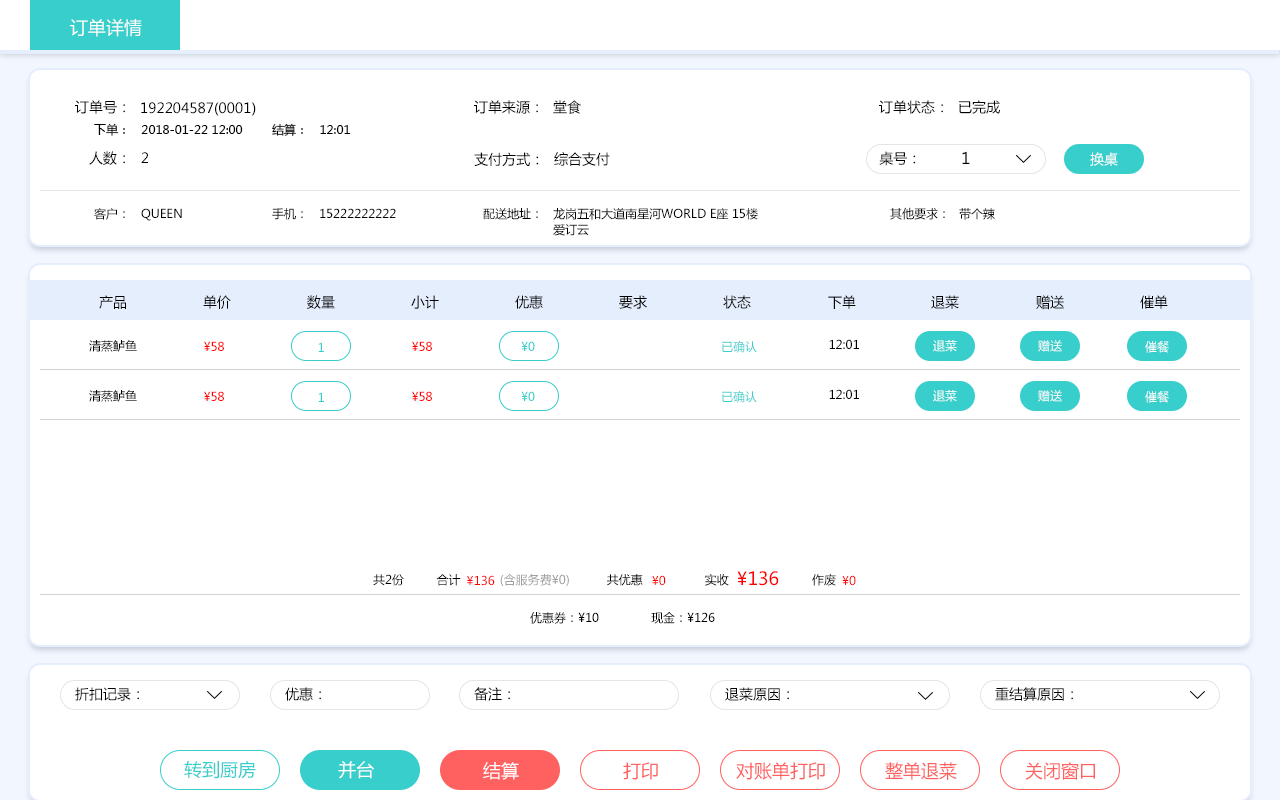
<style>
.page{position:relative;width:1280px;height:800px;background:#ffffff}
.page>*{position:absolute;margin:0}
.t1{font:18px "MicrosoftYaHei";color:#ffffff}
.t2{font:14px "MicrosoftYaHei";color:#000000}
.t3{font:12px "MicrosoftYaHei";color:#000000}
.t4{font:16px "MicrosoftYaHei";color:#000000}
.t5{font:14px "MicrosoftYaHei";color:#ffffff}
.t6{font:12px/16px "MicrosoftYaHei";color:#000000}
.t7{font:12px "MicrosoftYaHei";color:#ff0000}
.t8{font:12px "MicrosoftYaHei";color:#38cecc}
.t9{font:12px "MicrosoftYaHei";color:#ffffff}
.t10{font:12px "MicrosoftYaHei";color:#a0a0a0}
.t11{font:18px "MicrosoftYaHei";color:#ff0000}
.t12{font:18px "MicrosoftYaHei";color:#38cecc}
.t13{font:18px "MicrosoftYaHei";color:#ff6160}
</style>
<div class="page">
<p class="t1" style="left:70px;top:18px;width:72px;height:19px">订单详情</p>
<p class="t2" style="left:75px;top:100px;width:50px;height:14px">订单号：</p>
<p class="t2" style="left:141px;top:102px;width:115px;height:14px">192204587(0001)</p>
<p class="t2" style="left:474px;top:100px;width:64px;height:14px">订单来源：</p>
<p class="t2" style="left:553px;top:100px;width:28px;height:14px">堂食</p>
<p class="t2" style="left:879px;top:100px;width:64px;height:14px">订单状态：</p>
<p class="t2" style="left:959px;top:100px;width:41px;height:14px">已完成</p>
<p class="t3" style="left:94px;top:123px;width:31px;height:13px">下单：</p>
<p class="t3" style="left:141px;top:125px;width:102px;height:9px">2018-01-22 12:00</p>
<p class="t3" style="left:272px;top:123px;width:31px;height:13px">结算：</p>
<p class="t3" style="left:320px;top:125px;width:30px;height:9px">12:01</p>
<p class="t2" style="left:89px;top:151px;width:36px;height:14px">人数：</p>
<p class="t2" style="left:141px;top:152px;width:7px;height:11px">2</p>
<p class="t2" style="left:474px;top:152px;width:65px;height:14px">支付方式：</p>
<p class="t2" style="left:554px;top:152px;width:56px;height:14px">综合支付</p>
<p class="t2" style="left:879px;top:151px;width:37px;height:15px">桌号：</p>
<p class="t4" style="left:962px;top:151px;width:8px;height:13px">1</p>
<p class="t5" style="left:1090px;top:152px;width:28px;height:14px">换桌</p>
<p class="t3" style="left:94px;top:208px;width:31px;height:12px">客户：</p>
<p class="t3" style="left:141px;top:208px;width:41px;height:13px">QUEEN</p>
<p class="t3" style="left:272px;top:208px;width:31px;height:12px">手机：</p>
<p class="t3" style="left:320px;top:208px;width:76px;height:10px">15222222222</p>
<p class="t3" style="left:483px;top:208px;width:55px;height:12px">配送地址：</p>
<p class="t6" style="left:553px;top:208px;width:205px;height:28px">龙岗五和大道南星河WORLD E座 15楼<br>爱订云</p>
<p class="t3" style="left:890px;top:207px;width:55px;height:13px">其他要求：</p>
<p class="t3" style="left:959px;top:208px;width:36px;height:12px">带个辣</p>
<p class="t2" style="left:99px;top:295px;width:27px;height:14px">产品</p>
<p class="t2" style="left:203px;top:295px;width:28px;height:14px">单价</p>
<p class="t2" style="left:307px;top:295px;width:28px;height:14px">数量</p>
<p class="t2" style="left:411px;top:295px;width:28px;height:14px">小计</p>
<p class="t2" style="left:515px;top:295px;width:28px;height:14px">优惠</p>
<p class="t2" style="left:619px;top:295px;width:28px;height:14px">要求</p>
<p class="t2" style="left:723px;top:295px;width:28px;height:14px">状态</p>
<p class="t2" style="left:828px;top:295px;width:28px;height:14px">下单</p>
<p class="t2" style="left:931px;top:295px;width:28px;height:14px">退菜</p>
<p class="t2" style="left:1036px;top:295px;width:28px;height:15px">赠送</p>
<p class="t2" style="left:1140px;top:295px;width:28px;height:14px">催单</p>
<p class="t3" style="left:89px;top:340px;width:48px;height:12px">清蒸鲈鱼</p>
<p class="t7" style="left:204px;top:341px;width:20px;height:10px">¥58</p>
<p class="t8" style="left:318px;top:342px;width:6px;height:10px">1</p>
<p class="t7" style="left:412px;top:341px;width:20px;height:10px">¥58</p>
<p class="t8" style="left:521px;top:341px;width:14px;height:10px">¥0</p>
<p class="t8" style="left:722px;top:341px;width:35px;height:12px">已确认</p>
<p class="t3" style="left:829px;top:339px;width:30px;height:10px">12:01</p>
<p class="t9" style="left:933px;top:340px;width:24px;height:12px">退菜</p>
<p class="t9" style="left:1038px;top:340px;width:24px;height:12px">赠送</p>
<p class="t9" style="left:1145px;top:341px;width:24px;height:12px">催餐</p>
<p class="t3" style="left:89px;top:390px;width:48px;height:12px">清蒸鲈鱼</p>
<p class="t3" style="left:829px;top:389px;width:30px;height:10px">12:01</p>
<p class="t9" style="left:933px;top:390px;width:24px;height:12px">退菜</p>
<p class="t9" style="left:1038px;top:390px;width:24px;height:12px">赠送</p>
<p class="t7" style="left:204px;top:391px;width:20px;height:10px">¥58</p>
<p class="t8" style="left:318px;top:392px;width:6px;height:10px">1</p>
<p class="t7" style="left:412px;top:391px;width:20px;height:10px">¥58</p>
<p class="t8" style="left:521px;top:391px;width:14px;height:10px">¥0</p>
<p class="t8" style="left:722px;top:391px;width:35px;height:12px">已确认</p>
<p class="t9" style="left:1145px;top:391px;width:24px;height:12px">催餐</p>
<p class="t3" style="left:373px;top:574px;width:31px;height:12px">共2份</p>
<p class="t3" style="left:436px;top:574px;width:25px;height:12px">合计</p>
<p class="t7" style="left:467px;top:575px;width:28px;height:11px">¥136</p>
<p class="t10" style="left:500px;top:574px;width:69px;height:12px">(含服务费¥0)</p>
<p class="t3" style="left:607px;top:574px;width:36px;height:12px">共优惠</p>
<p class="t7" style="left:652px;top:575px;width:14px;height:11px">¥0</p>
<p class="t3" style="left:705px;top:574px;width:24px;height:12px">实收</p>
<p class="t11" style="left:737px;top:571px;width:42px;height:15px">¥136</p>
<p class="t3" style="left:812px;top:574px;width:24px;height:12px">作废</p>
<p class="t7" style="left:842px;top:575px;width:14px;height:11px">¥0</p>
<p class="t3" style="left:530px;top:612px;width:69px;height:12px">优惠券：¥10</p>
<p class="t3" style="left:651px;top:612px;width:64px;height:12px">现金：¥126</p>
<p class="t2" style="left:75px;top:687px;width:64px;height:14px">折扣记录：</p>
<p class="t2" style="left:285px;top:687px;width:36px;height:14px">优惠：</p>
<p class="t2" style="left:474px;top:687px;width:36px;height:14px">备注：</p>
<p class="t2" style="left:725px;top:687px;width:64px;height:14px">退菜原因：</p>
<p class="t2" style="left:995px;top:687px;width:78px;height:14px">重结算原因：</p>
<p class="t12" style="left:184px;top:761px;width:72px;height:18px">转到厨房</p>
<p class="t1" style="left:338px;top:761px;width:36px;height:18px">并台</p>
<p class="t1" style="left:483px;top:762px;width:36px;height:18px">结算</p>
<p class="t13" style="left:623px;top:762px;width:35px;height:18px">打印</p>
<p class="t13" style="left:736px;top:762px;width:89px;height:18px">对账单打印</p>
<p class="t13" style="left:885px;top:762px;width:72px;height:18px">整单退菜</p>
<p class="t13" style="left:1025px;top:762px;width:70px;height:18px">关闭窗口</p>
</div>
